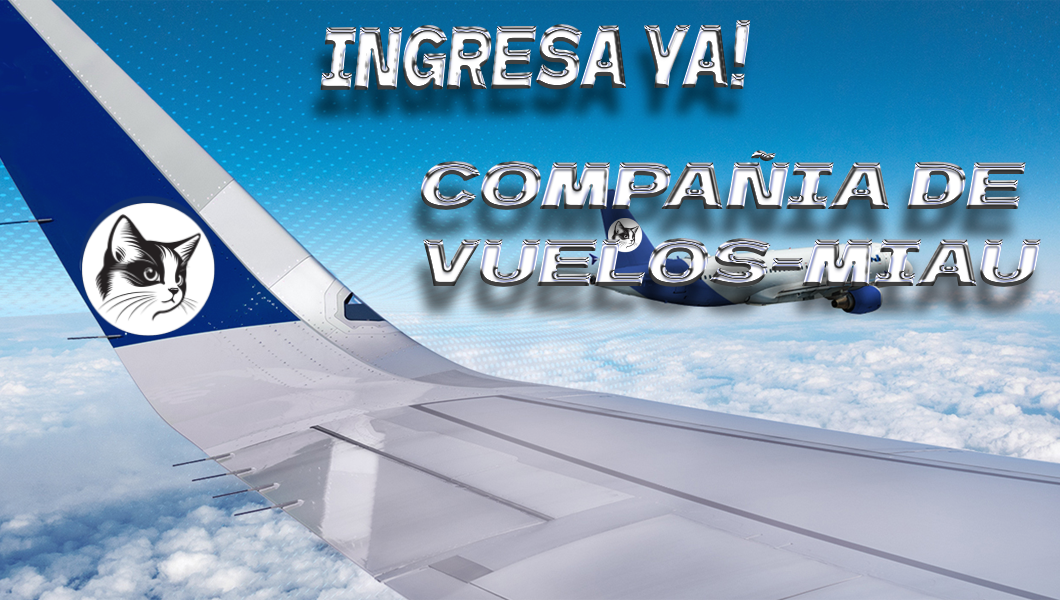
<style>
.page{position:relative;width:1060px;height:600px}
.page>*{position:absolute;margin:0}
.t1{font:86.1px "DelaGothicOne-Regular";font-weight:bold;font-style:italic;scale:0.57 1}
.t2{font:64px "DelaGothicOne-Regular";font-weight:bold;font-style:italic}
</style>
<div class="page">
<p class="t1" style="left:320px;top:20px;width:431px;height:71px">INGRESA YA!</p>
<p class="t2" style="left:420px;top:150px;width:621px;height:137px">COMPAÑIA DE <br>VUELOS-MIAU</p>
</div>
